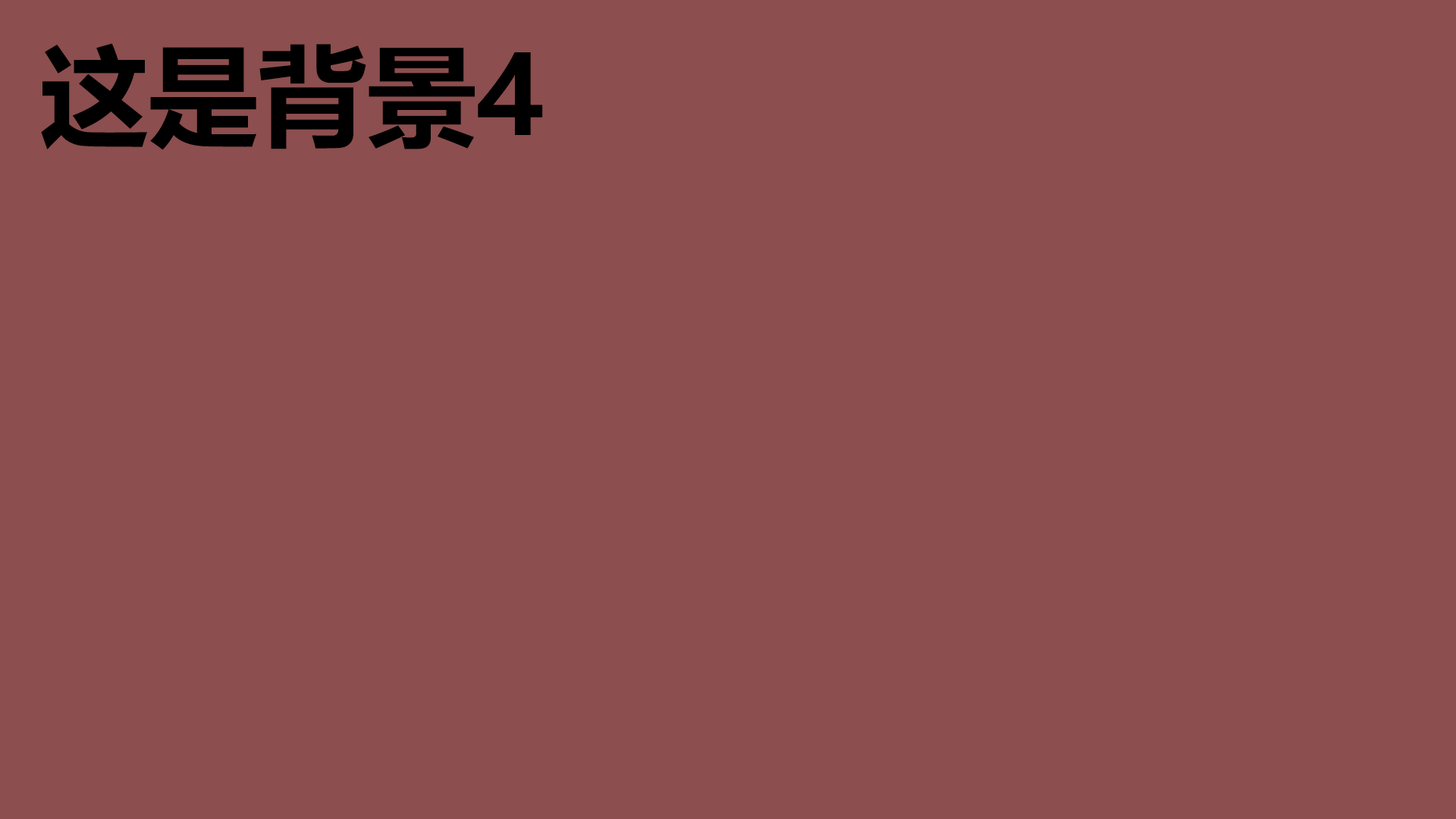
<style>
.page{position:relative;width:1456px;height:819px;background:#8c4e4e}
.page>*{position:absolute;margin:0}
.t1{font:109.2px "MicrosoftYaHei-Bold";color:#000000}
</style>
<div class="page">
<p class="t1" style="left:41px;top:43px;width:502px;height:107px">这是背景4</p>
</div>
